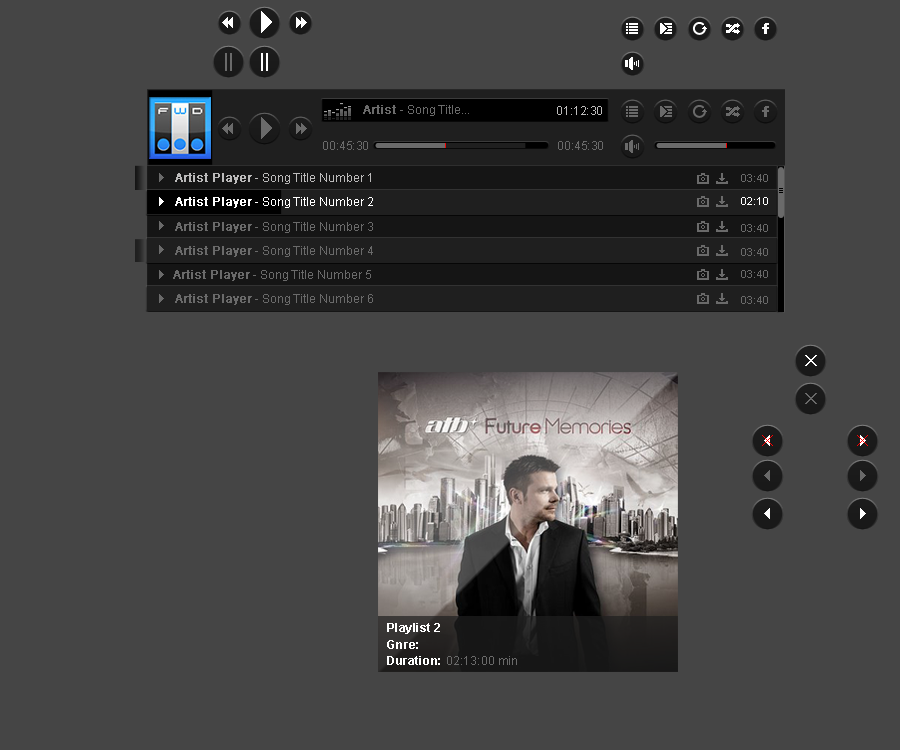
<style>
.page{position:relative;width:900px;height:750px;background:#454545}
.page>*{position:absolute;margin:0}
.t1{font:12px "ArialMT";color:#6a6a6a}
.t2{font:12px "ArialMT";color:#6a6a6a;font-weight:bold}
.t3{font:12px "ArialMT";color:#bcbbbb}
.t4{font:12px "ArialMT";color:#bcbbbb;font-weight:bold}
.t5{font:11px "ArialMT";color:#6a6a6a}
.t6{font:12px "ArialMT";color:#ffffff}
.t7{font:12px "ArialMT";color:#ffffff;font-weight:bold}
.t8{font:11px "ArialMT";color:#ffffff}
.t9{font:12px/16.4px "ArialMT";letter-spacing:0.02em;color:#6a6a6a}
.t10{font:12px/16.4px "Arial-BoldMT";letter-spacing:0.02em;color:#ffffff}
</style>
<div class="page">
<p class="t1" style="left:363px;top:105px;width:106px;height:11px"><span class="t2">Artist </span>- Song Title...</p>
<p class="t3" style="left:557px;top:106px;width:45px;height:9px">01:12:30</p>
<p class="t1" style="left:323px;top:141px;width:45px;height:9px">00:45:30</p>
<p class="t1" style="left:558px;top:141px;width:45px;height:9px">00:45:30</p>
<p class="t3" style="left:175px;top:173px;width:196px;height:11px"><span class="t4">Artist Player</span> - Song Title Number 1</p>
<p class="t5" style="left:741px;top:174px;width:27px;height:8px">03:40</p>
<p class="t6" style="left:175px;top:197px;width:198px;height:11px"><span class="t7">Artist Player</span> - Song Title Number 2</p>
<p class="t8" style="left:741px;top:197px;width:27px;height:8px">02:10</p>
<p class="t1" style="left:175px;top:222px;width:198px;height:11px"><span class="t2">Artist Player</span> - Song Title Number 3</p>
<p class="t5" style="left:741px;top:224px;width:27px;height:8px">03:40</p>
<p class="t1" style="left:175px;top:246px;width:198px;height:11px"><span class="t2">Artist Player</span> - Song Title Number 4</p>
<p class="t5" style="left:741px;top:248px;width:27px;height:8px">03:40</p>
<p class="t1" style="left:173px;top:270px;width:198px;height:11px"><span class="t2">Artist Player</span> - Song Title Number 5</p>
<p class="t5" style="left:741px;top:270px;width:27px;height:8px">03:40</p>
<p class="t1" style="left:175px;top:294px;width:198px;height:11px"><span class="t2">Artist Player</span> - Song Title Number 6</p>
<p class="t5" style="left:741px;top:296px;width:27px;height:8px">03:40</p>
<p class="t9" style="left:387px;top:623px;width:130px;height:42px"><span class="t10">Playlist 2<br></span><span class="t10">Gnre: <br></span><span class="t10">Duration: </span>02:13:00 min</p>
</div>
